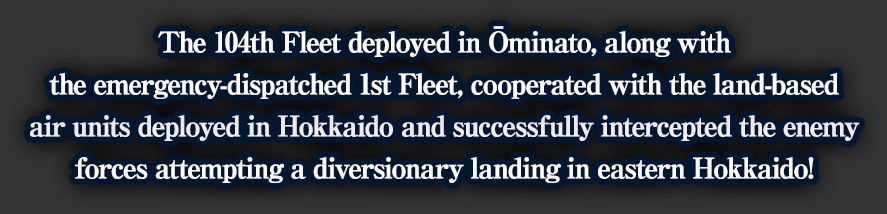
<style>
.page{position:relative;width:887px;height:214px;background:#03172f}
.page>*{position:absolute;margin:0}
.t1{font:28px/42px "RyuminPro-ExBold";letter-spacing:-0.08em;color:#ffffff;font-weight:bold}
</style>
<div class="page">
<p class="t1" style="left:30px;top:26px;width:830px;height:157px;text-align:center">The 104th Fleet deployed in Ōminato, along with<br>the emergency-dispatched 1st Fleet, cooperated with the land-based<br>air units deployed in Hokkaido and successfully intercepted the enemy<br>forces attempting a diversionary landing in eastern Hokkaido!</p>
</div>
